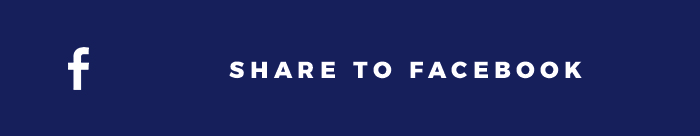
<style>
.page{position:relative;width:700px;height:136px;background:#161f5b}
.page>*{position:absolute;margin:0}
.t1{font:23.3px "Montserrat-ExtraBold";letter-spacing:0.23em;color:#fffeff;text-transform:uppercase}
</style>
<div class="page">
<p class="t1" style="left:229px;top:61px;width:353px;height:18px">share to facebook</p>
</div>
